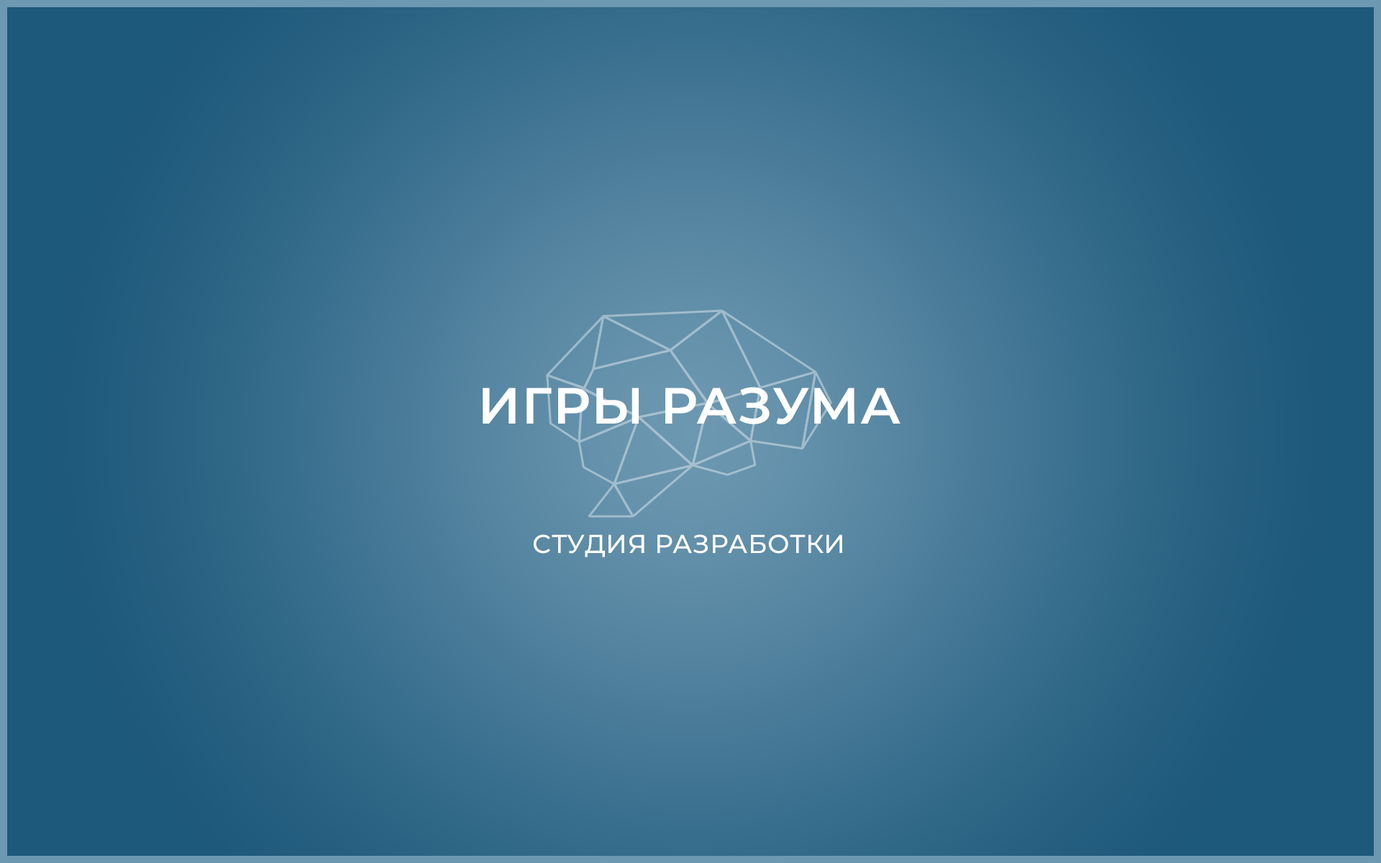
<style>
.page{position:relative;width:1381px;height:863px}
.page>*{position:absolute;margin:0}
.t1{font:51px "Montserrat-SemiBold";letter-spacing:0.02em;color:#ffffff;text-transform:uppercase}
.t2{font:25.9px "Montserrat-Medium";letter-spacing:0.02em;color:#ffffff;text-transform:uppercase}
</style>
<div class="page">
<p class="t1" style="left:483px;top:387px;width:418px;height:37px">Игры разума</p>
<p class="t2" style="left:533px;top:535px;width:309px;height:23px">Студия разработки</p>
</div>
